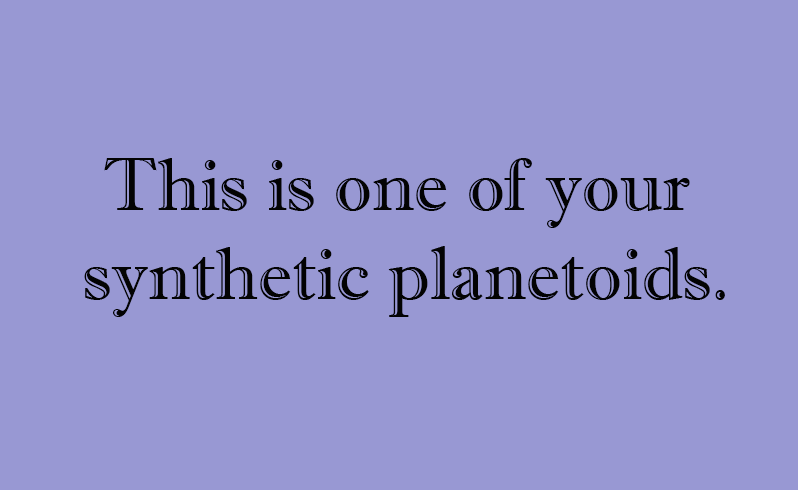
<style>
.page{position:relative;width:798px;height:490px;background:#9898d3}
.page>*{position:absolute;margin:0}
.t1{font:74.8px "ImprintMT-Shadow";color:#030303}
</style>
<div class="page">
<p class="t1" style="left:84px;top:158px;width:641px;height:159px;text-align:center">This is one of your <br>synthetic planetoids.</p>
</div>
